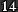
<style>
.page{position:relative;width:18px;height:12px;background:#333333}
.page>*{position:absolute;margin:0}
.t1{font:17px "Perpetua-Bold";color:#ffffff}
</style>
<div class="page">
<p class="t1" style="left:2px;top:1px;width:15px;height:10px">14</p>
</div>
